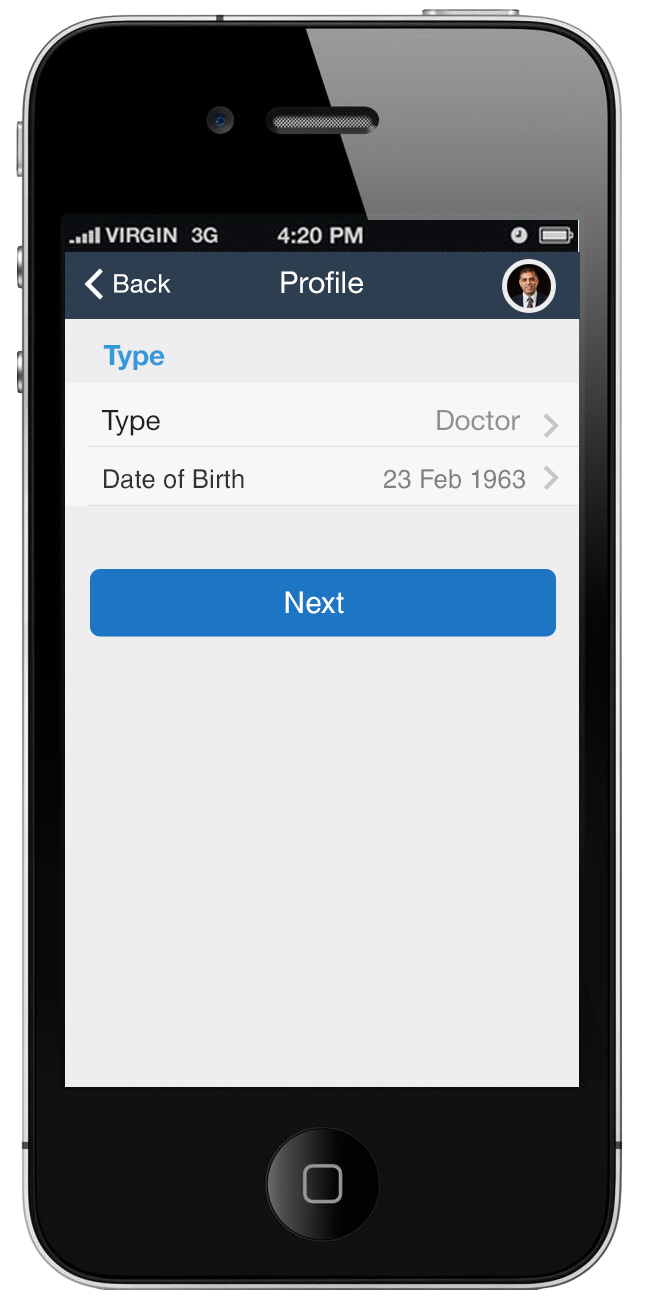
<style>
.page{position:relative;width:648px;height:1300px;background:#eeeeee}
.page>*{position:absolute;margin:0}
.t1{font:25.5px "HelveticaNeue";color:#ffffff}
.t2{font:30px "HelveticaNeue";color:#ffffff}
.t3{font:28px "HelveticaNeue-Bold";color:#3498db}
.t4{font:28px "HelveticaNeue";color:#919191}
.t5{font:28px "HelveticaNeue";color:#212121}
.t6{font:26px "HelveticaCyr-Upright";color:#333333}
.t7{font:26px "HelveticaCyr-Upright";color:#808080}
.t8{font:30px "HelveticaCyr-Upright";color:#ffffff}
</style>
<div class="page">
<p class="t1" style="left:114px;top:274px;width:57px;height:19px">Back</p>
<p class="t2" style="left:281px;top:271px;width:82px;height:23px">Profile</p>
<p class="t3" style="left:103px;top:345px;width:62px;height:25px">Type</p>
<p class="t4" style="left:102px;top:410px;width:418px;height:26px"><span class="t5">Type                    </span>Doctor</p>
<p class="t6" style="left:104px;top:469px;width:421px;height:20px">Date of Birth            <span class="t7">23 Feb 1963</span></p>
<p class="t8" style="left:285px;top:591px;width:59px;height:23px">Next</p>
</div>
